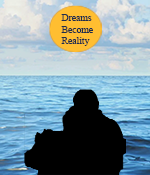
<style>
.page{position:relative;width:150px;height:175px;background:#000000}
.page>*{position:absolute;margin:0}
.t1{font:9.7px "TimesNewRomanPSMT";color:#1f2d4d}
</style>
<div class="page">
<p class="t1" style="left:61px;top:14px;width:32px;height:32px">Dreams<br>Become<br>Reality</p>
</div>
